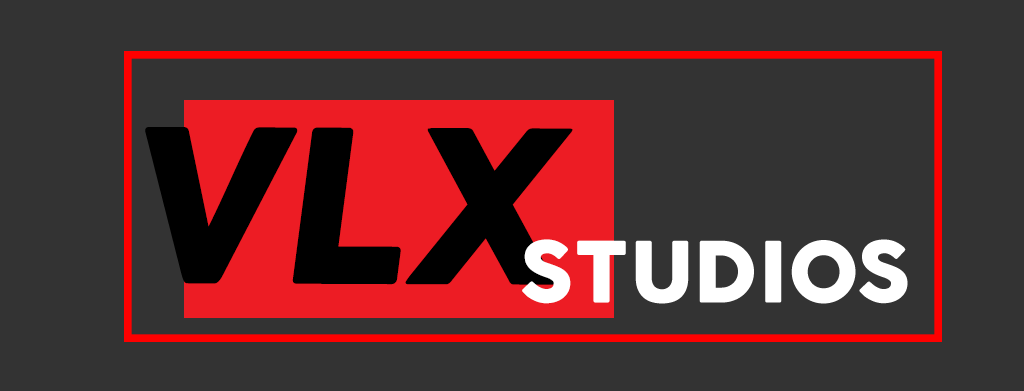
<style>
.page{position:relative;width:1024px;height:391px;background:#333333}
.page>*{position:absolute;margin:0}
.t1{font:211.8px "COCOGOOSE";color:#000000}
.t2{font:83.1px "COCOGOOSE";color:#ffffff}
</style>
<div class="page">
<p class="t1" style="left:145px;top:127px;width:428px;height:158px">VLX</p>
<p class="t2" style="left:522px;top:239px;width:386px;height:65px">STUDIOS</p>
</div>
